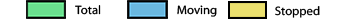
<style>
.page{position:relative;width:350px;height:22px;background:#ffffff}
.page>*{position:absolute;margin:0}
.t1{font:12.3px "Myriad-Web";color:#000000}
</style>
<div class="page">
<p class="t1" style="left:75px;top:5px;width:26px;height:10px">Total</p>
<p class="t1" style="left:177px;top:5px;width:40px;height:12px">Moving</p>
<p class="t1" style="left:275px;top:6px;width:45px;height:12px">Stopped</p>
</div>
